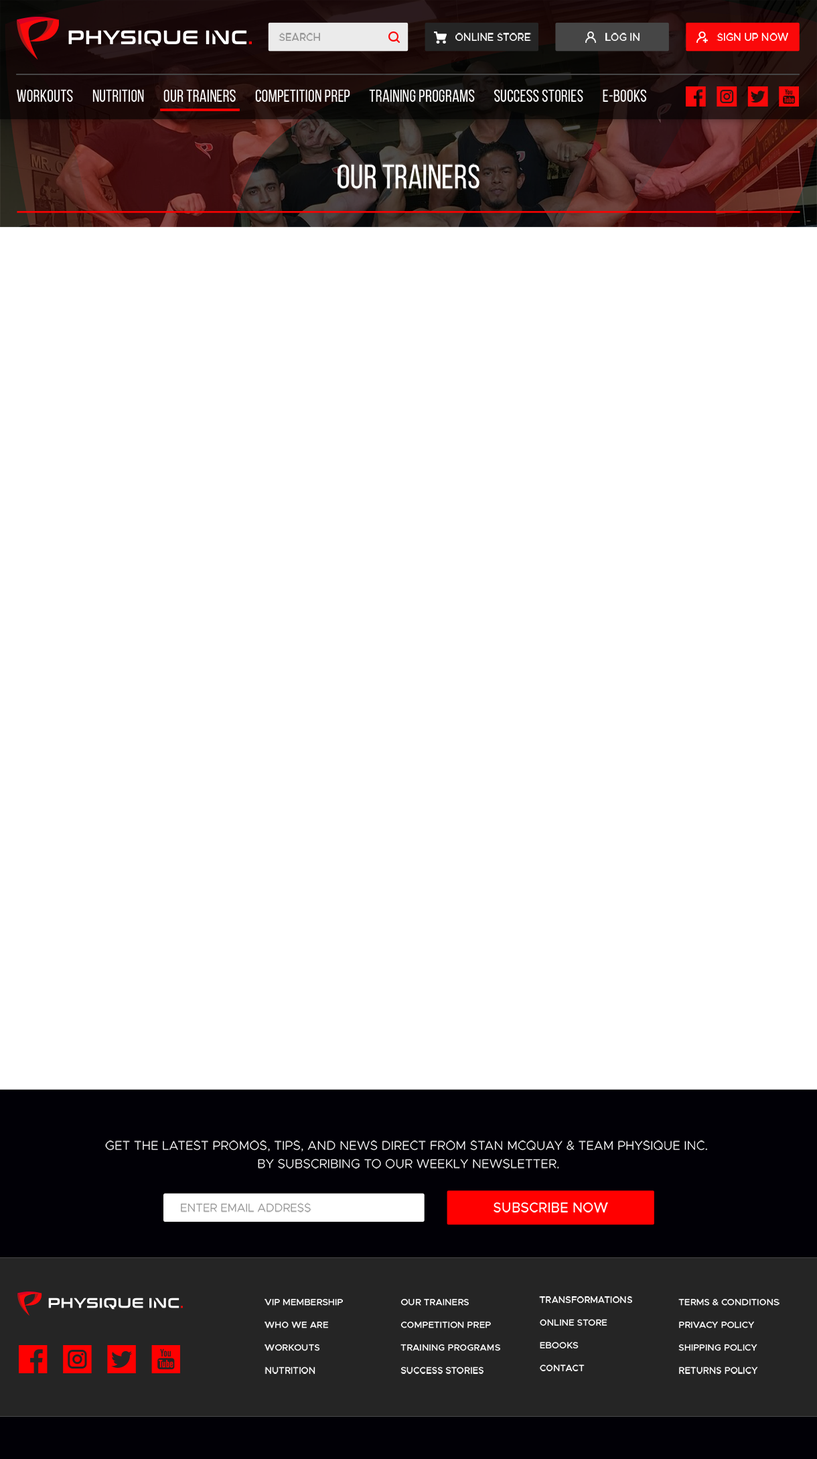
<style>
.page{position:relative;width:817px;height:1459px;background:#ffffff}
.page>*{position:absolute;margin:0}
.t1{font:10.2px "Metropolis-Medium";color:#959595;text-transform:uppercase}
.t2{font:10.2px "Metropolis-Medium";color:#ffffff;text-transform:uppercase}
.t3{font:17px "BebasNeueRegular";letter-spacing:0.005em;color:#ffffff;text-transform:uppercase}
.t4{font:34px "BebasNeueRegular";color:#ffffff;text-transform:uppercase}
.t5{font:12.5px/18.2px "Metropolis-Light";letter-spacing:0.005em;color:#ffffff;text-transform:uppercase}
.t6{font:11.3px "Metropolis-Light";letter-spacing:0.005em;color:#959595;text-transform:uppercase}
.t7{font:13.6px "Metropolis-Medium";color:#ffffff;text-transform:uppercase}
.t8{font:9.1px/22.7px "Metropolis-Medium";letter-spacing:0.005em;color:#ffffff}
</style>
<div class="page">
<p class="t1" style="left:279px;top:33px;width:41px;height:8px">SEARCH</p>
<p class="t2" style="left:456px;top:33px;width:75px;height:8px">ONLINE STORE</p>
<p class="t2" style="left:606px;top:33px;width:34px;height:8px">LOG IN</p>
<p class="t2" style="left:717px;top:33px;width:71px;height:8px">SIGN UP NOW</p>
<p class="t3" style="left:17px;top:89px;width:629px;height:13px">WORKOUTS       NUTRITION       OUR TRAINERS       COMPETITION PREP       TRAINING PROGRAMS       SUCCESS STORIES       E-BOOKS</p>
<p class="t4" style="left:338px;top:163px;width:142px;height:27px">OUR TRAINERS</p>
<p class="t5" style="left:105px;top:1140px;width:602px;height:29px;text-align:center">Get the latest promos, tips, and news direct from Stan McQuay &amp; Team Physique Inc. <br>by subscribing to our weekly newsletter.</p>
<p class="t6" style="left:181px;top:1202px;width:131px;height:11px">ENTER EMAIL ADDRESS</p>
<p class="t7" style="left:494px;top:1202px;width:114px;height:11px">SUBSCRIBE NOW</p>
<p class="t8" style="left:265px;top:1299px;width:78px;height:75px">VIP MEMBERSHIP<br>WHO WE ARE<br>WORKOUTS<br>NUTRITION</p>
<p class="t8" style="left:401px;top:1299px;width:99px;height:75px">OUR TRAINERS<br>COMPETITION PREP<br>TRAINING PROGRAMS<br>SUCCESS STORIES</p>
<p class="t8" style="left:539px;top:1296px;width:93px;height:75px">TRANSFORMATIONS<br>ONLINE STORE<br>EBOOKS<br>CONTACT</p>
<p class="t8" style="left:679px;top:1299px;width:101px;height:75px">TERMS &amp; CONDITIONS<br>PRIVACY POLICY<br>SHIPPING POLICY<br>RETURNS POLICY</p>
</div>
